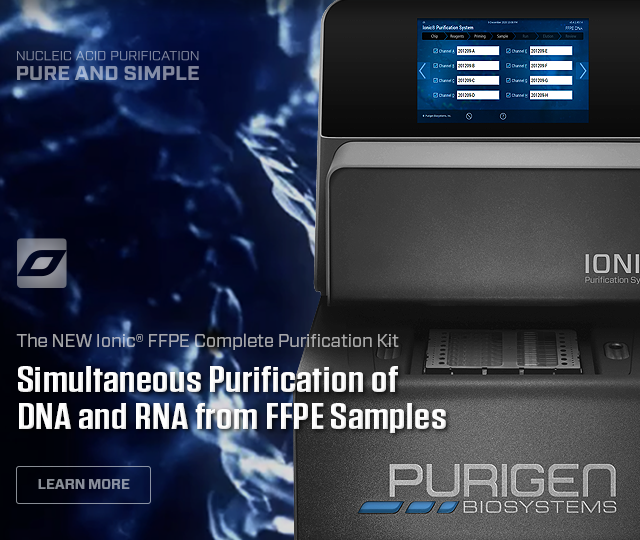
<style>
.page{position:relative;width:640px;height:540px}
.page>*{position:absolute;margin:0}
.t1{font:18px "Forza-Book";letter-spacing:-0.01em;color:#a5a7aa}
.t2{font:36px/37px "Tungsten-Semibold";letter-spacing:0.005em;color:#fefefe;scale:1.33 1}
.t3{font:14px "Forza-Bold";letter-spacing:-0.01em;color:#7c868c;text-transform:uppercase}
</style>
<div class="page">
<p class="t1" style="left:16px;top:333px;width:383px;height:17px">The NEW Ionic® FFPE Complete Purification Kit</p>
<p class="t2" style="left:18px;top:366px;width:428px;height:67px">Simultaneous Purification of<br>DNA and RNA from FFPE Samples</p>
<p class="t3" style="left:38px;top:479px;width:92px;height:10px">Learn More</p>
</div>
